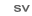
<style>
.page{position:relative;width:32px;height:16px;background:#ffffff}
.page>*{position:absolute;margin:0}
.t1{font:12.5px "ArialMT";color:#616161;scale:1.3 1}
</style>
<div class="page">
<p class="t1" style="left:13px;top:5px;width:17px;height:7px">sv</p>
</div>
